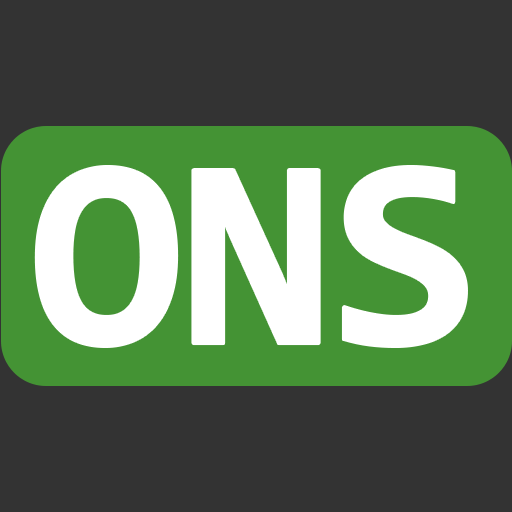
<style>
.page{position:relative;width:512px;height:512px;background:#333333}
.page>*{position:absolute;margin:0}
.t1{font:271px "Consolas-Bold";color:#ffffff}
</style>
<div class="page">
<p class="t1" style="left:36px;top:167px;width:430px;height:179px">ONS</p>
</div>
